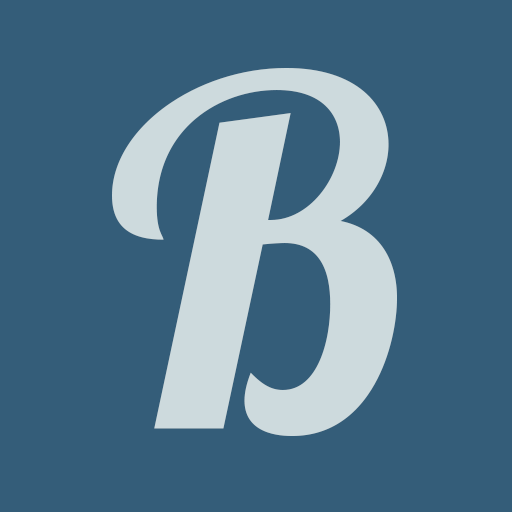
<style>
.page{position:relative;width:512px;height:512px;background:#345d79}
.page>*{position:absolute;margin:0}
.t1{font:480px "Lobster1.4";color:#cddadd}
</style>
<div class="page">
<p class="t1" style="left:112px;top:68px;width:285px;height:368px">B</p>
</div>
